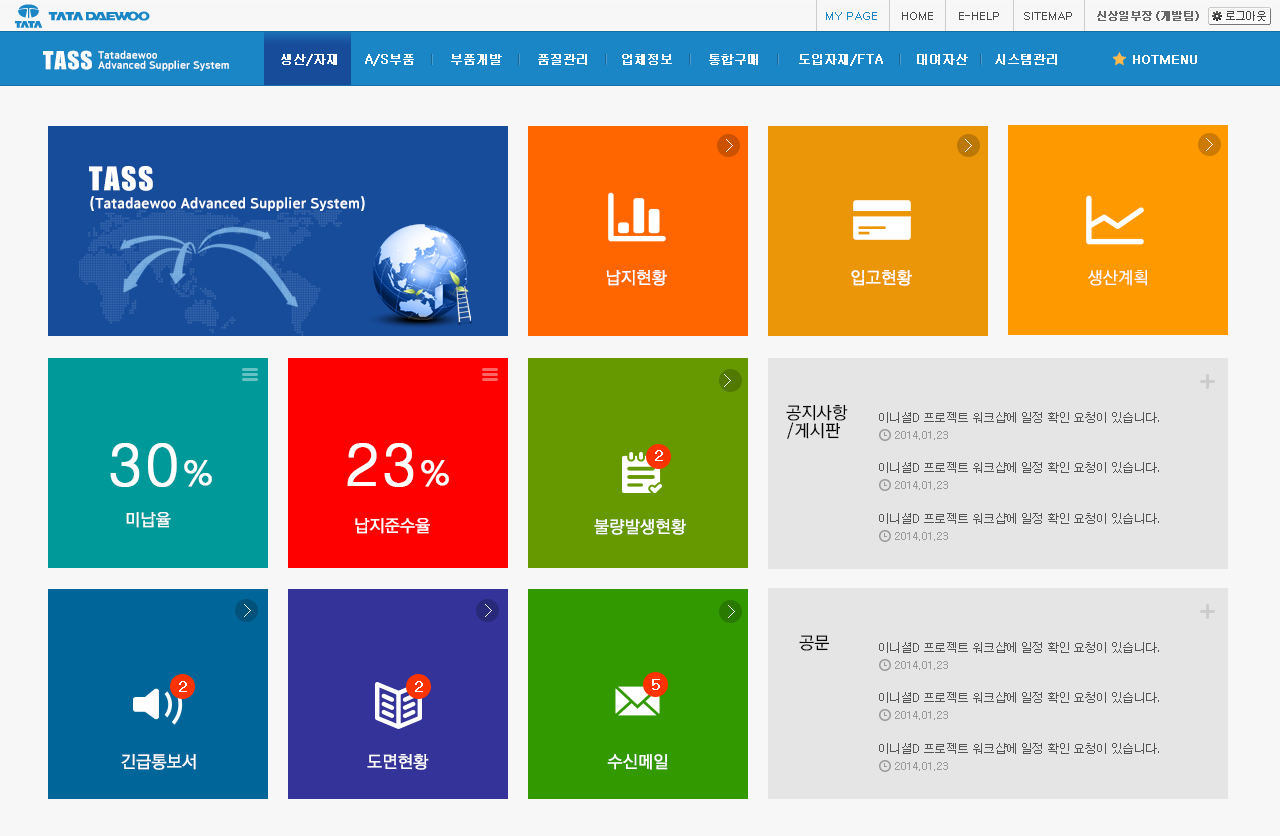
<style>
.page{position:relative;width:1280px;height:836px;background:#f7f7f7}
.page>*{position:absolute;margin:0}
.t1{font:11px "Dotum";color:#4a4a4a;text-transform:uppercase}
.t2{font:11px "Dotum";color:#1a86c6;text-transform:uppercase}
.t3{font:11px "Dotum";letter-spacing:-0.075em;color:#666666;font-weight:bold}
.t4{font:11px "Dotum";letter-spacing:-0.075em;color:#444444;scale:0.97 1}
.t5{font:23px "Impact";letter-spacing:0.05em;color:#ffffff}
.t6{font:11px/10px "Arita-dotum-Bold_TTF";color:#ffffff}
.t7{font:12px "Gulim";color:#fdfdfd;font-weight:bold}
.t8{font:12px "Dotum";color:#ffffff;font-weight:bold}
.t9{font:15px "Arita-dotum-Bold_TTF";color:#ffffff}
.t10{font:30px "Impact";letter-spacing:0.05em;color:#ffffff}
.t11{font:17px "RixGoM";color:#ffffff}
.t12{font:17px/18px "RixGoM";color:#000000}
.t13{font:12px/18px "Dotum";letter-spacing:-0.05em;color:#545454}
.t14{font:11px/17px "Gulim";color:#999999}
.t15{font:60px "Dotum";color:#ffffff;font-weight:bold}
.t16{font:36px "Dotum";color:#ffffff;font-weight:bold}
.t17{font:14px "Dotum";color:#ffffff;font-weight:bold}
.t18{font:17px "RixGoM";color:#000000}
</style>
<div class="page">
<p class="t1" style="left:826px;top:12px;width:246px;height:8px"><span class="t2">My Page        </span>Home        E-help        Sitemap</p>
<p class="t3" style="left:1097px;top:11px;width:102px;height:10px">신상일부장 (개발팀)</p>
<p class="t4" style="left:1226px;top:11px;width:40px;height:10px">로그아웃</p>
<p class="t5" style="left:43px;top:50px;width:49px;height:20px">TASS</p>
<p class="t6" style="left:98px;top:50px;width:131px;height:21px">Tatadaewoo <br>Advanced Supplier System</p>
<p class="t7" style="left:281px;top:54px;width:56px;height:12px">생산/자재</p>
<p class="t7" style="left:365px;top:54px;width:49px;height:12px">A/S부품</p>
<p class="t7" style="left:451px;top:54px;width:51px;height:11px">부품개발</p>
<p class="t7" style="left:538px;top:54px;width:49px;height:11px">품질관리</p>
<p class="t7" style="left:622px;top:54px;width:50px;height:11px">업체정보</p>
<p class="t7" style="left:709px;top:54px;width:49px;height:11px">통합구매</p>
<p class="t7" style="left:799px;top:54px;width:84px;height:12px">도입자재/FTA</p>
<p class="t7" style="left:917px;top:54px;width:51px;height:11px">대여자산</p>
<p class="t7" style="left:995px;top:54px;width:62px;height:11px">시스템관리</p>
<p class="t8" style="left:1133px;top:55px;width:64px;height:9px">HOTMENU</p>
<p class="t9" style="left:89px;top:166px;width:276px;height:45px"><span class="t10">TASS <br></span>(Tatadaewoo Advanced Supplier System)</p>
<p class="t11" style="left:606px;top:270px;width:61px;height:16px">납지현황</p>
<p class="t11" style="left:851px;top:270px;width:61px;height:16px">입고현황</p>
<p class="t11" style="left:1088px;top:270px;width:59px;height:16px">생산계획</p>
<p class="t12" style="left:786px;top:404px;width:62px;height:35px">공지사항<br>/게시판</p>
<p class="t13" style="left:879px;top:412px;width:280px;height:28px">이니셜D 프로젝트 워크샵에 일정 확인 요청이 있습니다.<br> <span class="t14">   2014.01.23</span></p>
<p class="t15" style="left:110px;top:443px;width:102px;height:44px">30<span class="t16">%</span></p>
<p class="t15" style="left:347px;top:443px;width:102px;height:44px">23<span class="t16">%</span></p>
<p class="t17" style="left:655px;top:450px;width:8px;height:11px">2</p>
<p class="t13" style="left:879px;top:462px;width:280px;height:28px">이니셜D 프로젝트 워크샵에 일정 확인 요청이 있습니다.<br> <span class="t14">   2014.01.23</span></p>
<p class="t11" style="left:126px;top:512px;width:45px;height:16px">미납율</p>
<p class="t11" style="left:355px;top:518px;width:75px;height:16px">납지준수율</p>
<p class="t11" style="left:594px;top:519px;width:92px;height:16px">불량발생현황</p>
<p class="t13" style="left:879px;top:513px;width:280px;height:28px">이니셜D 프로젝트 워크샵에 일정 확인 요청이 있습니다.<br> <span class="t14">   2014.01.23</span></p>
<p class="t18" style="left:799px;top:635px;width:31px;height:16px">공문</p>
<p class="t13" style="left:879px;top:642px;width:280px;height:28px">이니셜D 프로젝트 워크샵에 일정 확인 요청이 있습니다.<br> <span class="t14">   2014.01.23</span></p>
<p class="t17" style="left:179px;top:681px;width:8px;height:11px">2</p>
<p class="t17" style="left:415px;top:681px;width:8px;height:11px">2</p>
<p class="t17" style="left:652px;top:679px;width:8px;height:11px">5</p>
<p class="t13" style="left:879px;top:692px;width:280px;height:28px">이니셜D 프로젝트 워크샵에 일정 확인 요청이 있습니다.<br> <span class="t14">   2014.01.23</span></p>
<p class="t13" style="left:879px;top:743px;width:280px;height:28px">이니셜D 프로젝트 워크샵에 일정 확인 요청이 있습니다.<br> <span class="t14">   2014.01.23</span></p>
<p class="t11" style="left:121px;top:754px;width:75px;height:16px">긴급통보서</p>
<p class="t11" style="left:367px;top:754px;width:62px;height:16px">도면현황</p>
<p class="t11" style="left:607px;top:754px;width:61px;height:16px">수신메일</p>
</div>
